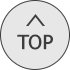
<style>
.page{position:relative;width:70px;height:70px;background:#e7e7e7}
.page>*{position:absolute;margin:0}
.t1{font:19px "NanumBarunGothicBold";color:#3d3d3d}
</style>
<div class="page">
<p class="t1" style="left:17px;top:34px;width:36px;height:16px">TOP</p>
</div>
